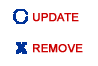
<style>
.page{position:relative;width:98px;height:66px;background:#ffffff}
.page>*{position:absolute;margin:0}
.t1{font:11.3px "ArialMT";color:#cc0000;font-weight:bold}
</style>
<div class="page">
<p class="t1" style="left:33px;top:13px;width:46px;height:9px">UPDATE</p>
<p class="t1" style="left:33px;top:44px;width:50px;height:9px">REMOVE</p>
</div>
